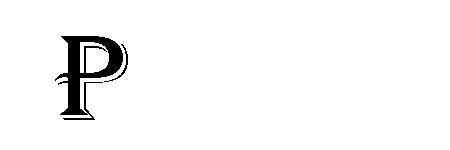
<style>
.page{position:relative;width:450px;height:150px;background:#ffffff}
.page>*{position:absolute;margin:0}
.t1{font:126px "Algerian";letter-spacing:0.05em;color:#000000}
</style>
<div class="page">
<p class="t1" style="left:55px;top:36px;width:73px;height:84px">P</p>
</div>
